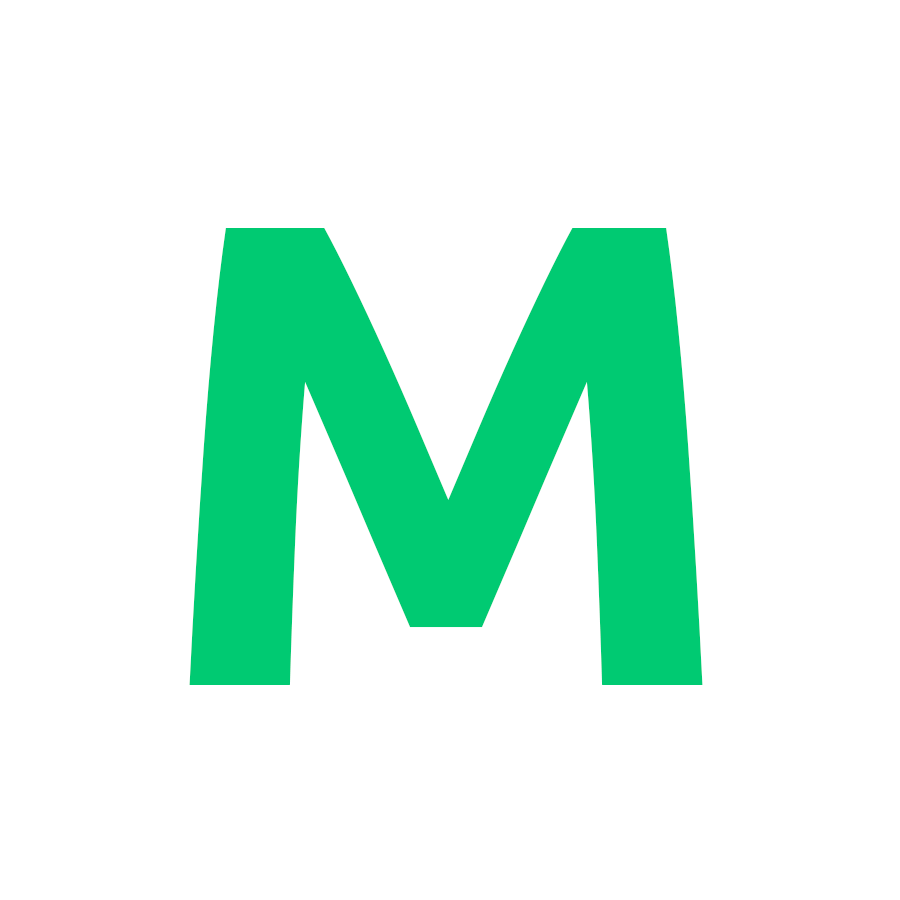
<style>
.page{position:relative;width:900px;height:900px;background:#ffffff}
.page>*{position:absolute;margin:0}
.t1{font:660.5px "Ubuntu-Bold";letter-spacing:0.01em;color:#00ca72}
</style>
<div class="page">
<p class="t1" style="left:189px;top:228px;width:514px;height:457px">M</p>
</div>
